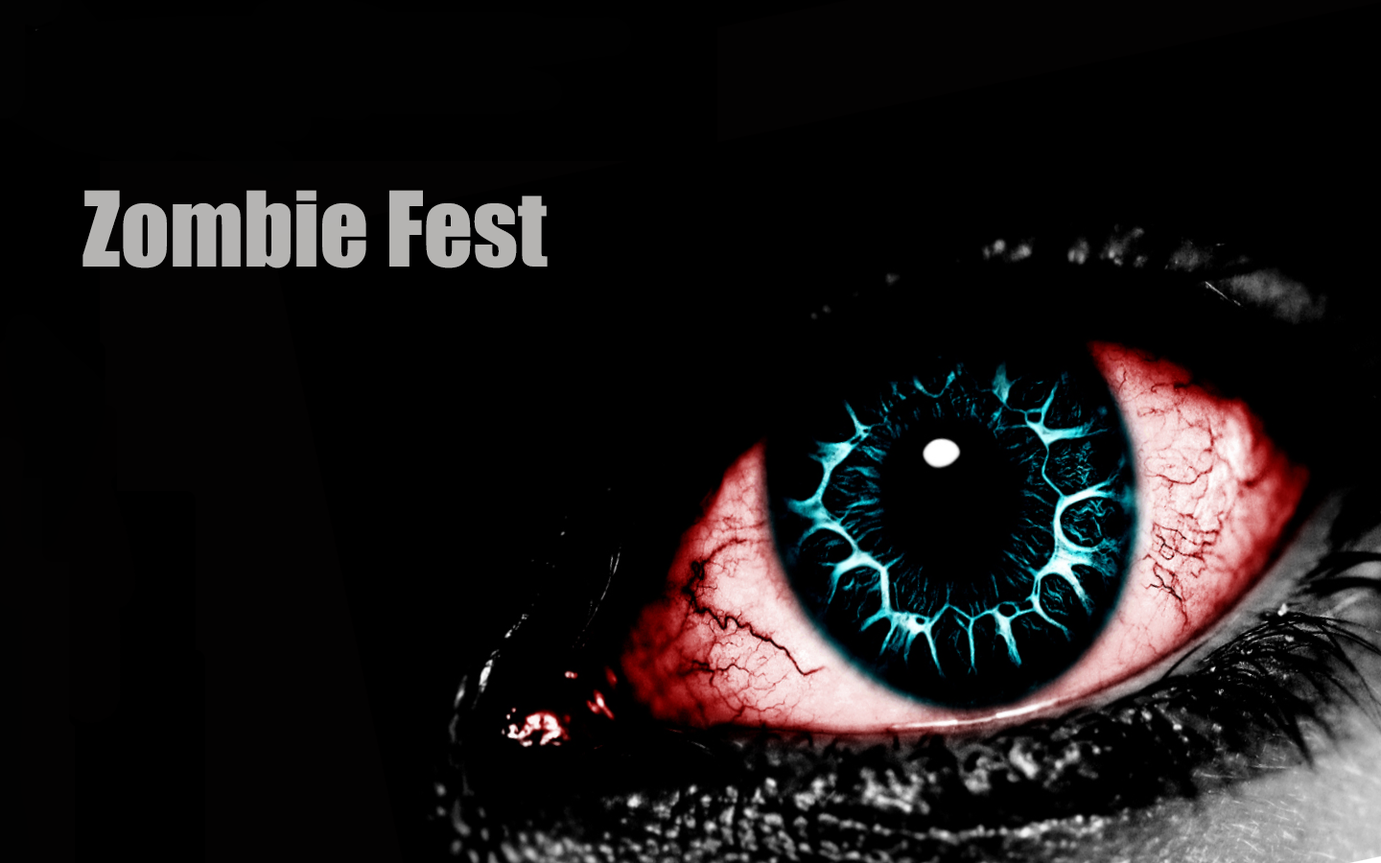
<style>
.page{position:relative;width:1381px;height:863px;background:#000000}
.page>*{position:absolute;margin:0}
.t1{font:95.9px "Impact";color:#b5b4b3}
</style>
<div class="page">
<p class="t1" style="left:82px;top:190px;width:466px;height:79px">Zombie Fest</p>
</div>
